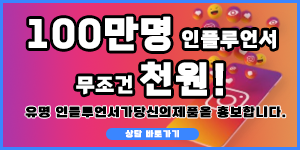
<style>
.page{position:relative;width:300px;height:150px}
.page>*{position:absolute;margin:0}
.t1{font:19.7px/45.3px "TheJamsil6ExtraBold";letter-spacing:0.05em;color:#ffffff;font-weight:bold}
.t2{font:36.1px/45.3px "TheJamsil6ExtraBold";letter-spacing:0.05em;color:#ffffff;font-weight:bold}
.t3{font:12.5px "SBAggroB";letter-spacing:0.05em;color:#000000;font-weight:bold}
.t4{font:8.3px "SBAggroB";letter-spacing:0.05em;color:#ffffff;font-weight:bold}
</style>
<div class="page">
<p class="t1" style="left:28px;top:16px;width:248px;height:80px;text-align:center"><span class="t2">100만명</span> 인플루언서<br>무조건 <span class="t2">천원</span><span class="t2">!</span></p>
<p class="t3" style="left:25px;top:106px;width:261px;height:12px">유명 인플루언서가당신의제품을 홍보합니다.</p>
<p class="t4" style="left:125px;top:130px;width:54px;height:8px">상담 바로가기</p>
</div>
